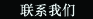
<style>
.page{position:relative;width:93px;height:19px;background:#060808}
.page>*{position:absolute;margin:0}
.t1{font:14px "STZhongsong";color:#e6f2f0}
</style>
<div class="page">
<p class="t1" style="left:20px;top:3px;width:55px;height:14px">联系我们</p>
</div>
